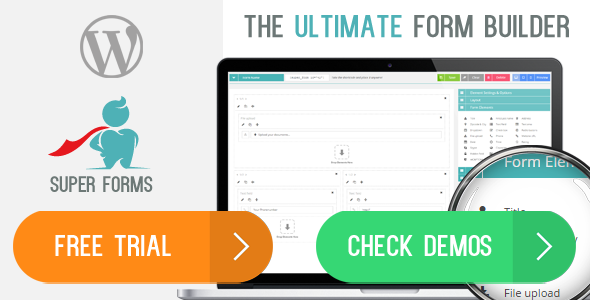
<style>
.page{position:relative;width:590px;height:300px;background:#ffffff}
.page>*{position:absolute;margin:0}
.t1{font:31.7px "Kenzo";letter-spacing:0.025em;color:#6c7776}
.t2{font:31.7px "Kenzo";letter-spacing:0.025em;color:#4eb1b6}
.t3{font:30px "Kenzo";letter-spacing:0.025em;color:#ffffff}
</style>
<div class="page">
<p class="t1" style="left:244px;top:15px;width:325px;height:23px">The <span class="t2">ultimate</span> form builder</p>
<p class="t3" style="left:55px;top:235px;width:116px;height:21px">free trial</p>
<p class="t3" style="left:348px;top:235px;width:144px;height:21px">check demos</p>
</div>
